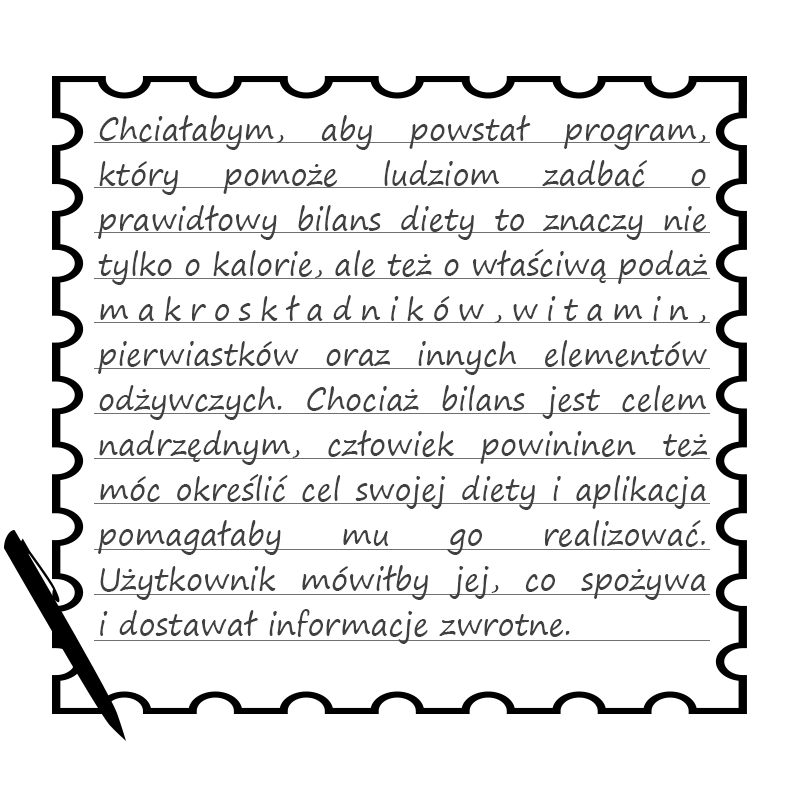
<style>
.page{position:relative;width:800px;height:800px;background:#ffffff}
.page>*{position:absolute;margin:0}
.t1{font:30px/45px "SegoePrint";color:#414040}
</style>
<div class="page">
<p class="t1" style="left:98px;top:115px;width:609px;height:529px;text-align:justify">Chciałabym, aby powstał program, który pomoże ludziom zadbać o prawidłowy bilans diety to znaczy nie tylko o kalorie, ale też o właściwą podaż makroskładników,witamin, pierwiastków oraz innych elementów odżywczych. Chociaż bilans jest celem nadrzędnym, człowiek powininen też móc określić cel swojej diety i aplikacja pomagałaby mu go realizować. Użytkownik mówiłby jej, co spożywa <br>i dostawał informacje zwrotne.</p>
</div>
